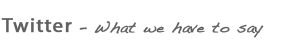
<style>
.page{position:relative;width:300px;height:50px;background:#ffffff}
.page>*{position:absolute;margin:0}
.t1{font:14.6px "Handwriting-Dakota";letter-spacing:0.04em;color:#606060;font-weight:bold}
.t2{font:20.8px "MyriadPro-Regular";letter-spacing:0.04em;color:#606060;font-weight:bold}
.t3{font:14.6px "Handwriting-Dakota";letter-spacing:0.04em;color:#606060;font-weight:bold;scale:0.96 1}
</style>
<div class="page">
<p class="t1" style="left:1px;top:18px;width:263px;height:20px"><span class="t2">Twitter </span><span class="t3">- </span>What we have to say</p>
</div>
